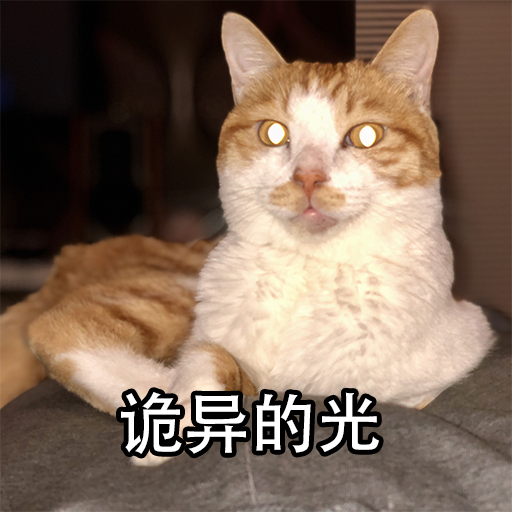
<style>
.page{position:relative;width:512px;height:512px}
.page>*{position:absolute;margin:0}
.t1{font:66px "AdobeHeitiStd-Regular";color:#ffffff}
</style>
<div class="page">
<p class="t1" style="left:121px;top:392px;width:258px;height:62px">诡异的光</p>
</div>
